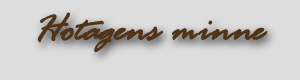
<style>
.page{position:relative;width:300px;height:80px;background:#dddddd}
.page>*{position:absolute;margin:0}
.t1{font:39.9px "RageItalicLetPlain";color:#513417;font-weight:bold;font-style:italic}
</style>
<div class="page">
<p class="t1" style="left:37px;top:12px;width:231px;height:41px">Hotagens minne</p>
</div>
